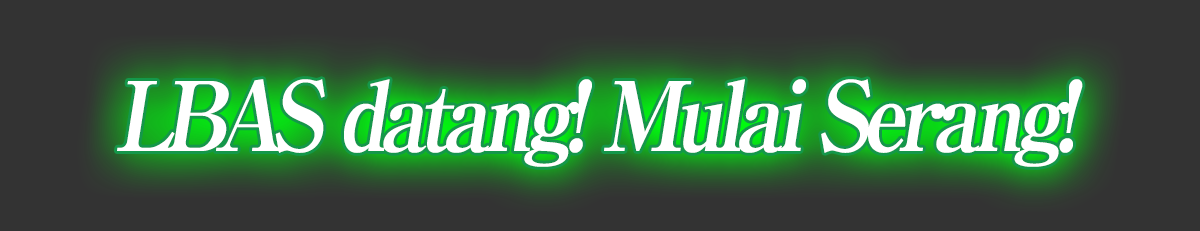
<style>
.page{position:relative;width:1200px;height:231px;background:#333333}
.page>*{position:absolute;margin:0}
.t1{font:96px "RyuminPro-ExBold";letter-spacing:-0.08em;color:#ffffff;font-style:italic;scale:0.9 1}
</style>
<div class="page">
<p class="t1" style="left:117px;top:79px;width:966px;height:88px">LBAS datang! Mulai Serang!</p>
</div>
